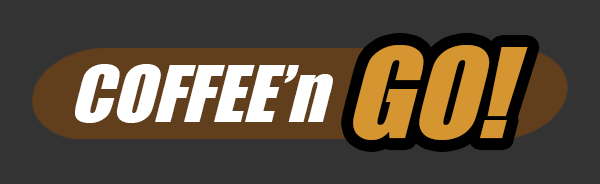
<style>
.page{position:relative;width:600px;height:184px;background:#333333}
.page>*{position:absolute;margin:0}
.t1{font:118.6px "Impact";color:#d9a825}
.t2{font:74.8px "Impact";color:#ffffff}
</style>
<div class="page">
<p class="t1" style="left:353px;top:45px;width:175px;height:95px">GO!</p>
<p class="t2" style="left:75px;top:64px;width:258px;height:59px">COFFEE’n</p>
</div>
